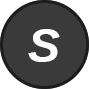
<style>
.page{position:relative;width:89px;height:89px;background:#3a3a3a}
.page>*{position:absolute;margin:0}
.t1{font:48.2px "LiberationSans-BoldItalic";color:#ffffff}
</style>
<div class="page">
<p class="t1" style="left:28px;top:29px;width:32px;height:33px">S</p>
</div>
